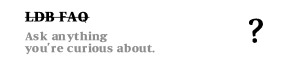
<style>
.page{position:relative;width:292px;height:84px;background:#ffffff}
.page>*{position:absolute;margin:0}
.t1{font:12.5px "SDGdMyeongjo";letter-spacing:0.05em;color:#000000}
.t2{font:30px "SDGdMyeongjo";letter-spacing:0.05em;color:#000000}
.t3{font:10px "SDGdMyeongjo";letter-spacing:0.05em;color:#8f8e8e}
</style>
<div class="page">
<p class="t1" style="left:24px;top:11px;width:66px;height:12px">LDB FAQ</p>
<p class="t2" style="left:249px;top:18px;width:14px;height:25px">?</p>
<p class="t3" style="left:24px;top:31px;width:131px;height:24px;text-align:justify">Ask anything<br>you're curious about.</p>
</div>
